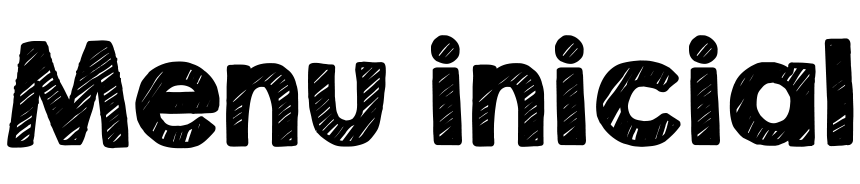
<style>
.page{position:relative;width:860px;height:184px;background:#ffffff}
.page>*{position:absolute;margin:0}
.t1{font:125px "KGSecondChancesSketch";color:#000000;font-weight:bold}
</style>
<div class="page">
<p class="t1" style="left:7px;top:35px;width:847px;height:114px">Menu inicial</p>
</div>
